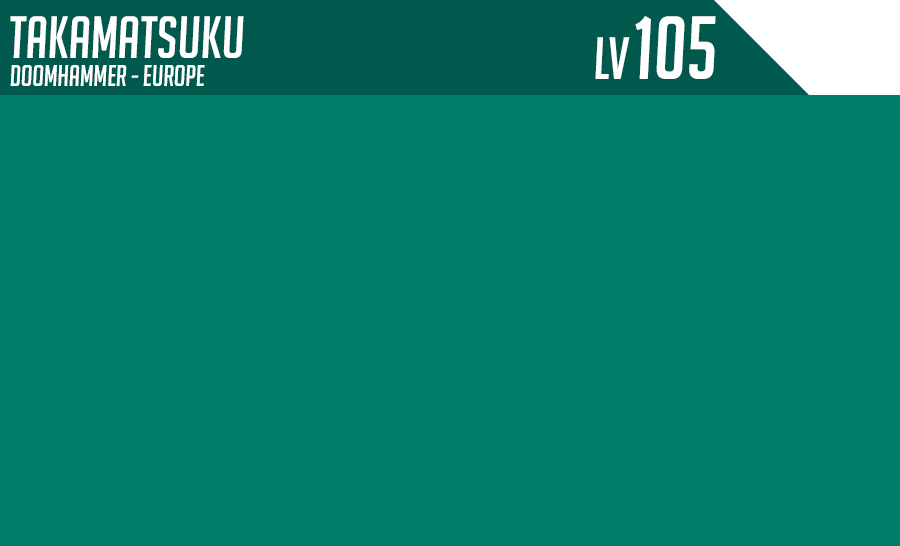
<style>
.page{position:relative;width:900px;height:546px;background:#007d6b}
.page>*{position:absolute;margin:0}
.t1{font:100px "BigNoodleTitling-Oblique";color:#ffffff}
.t2{font:150px "BigNoodleTitling-Oblique";color:#ffffff}
.t3{font:50px "BigNoodleTitling-Oblique";color:#ffffff}
</style>
<div class="page">
<p class="t1" style="left:10px;top:16px;width:234px;height:42px">takamatsuku</p>
<p class="t2" style="left:635px;top:16px;width:81px;height:63px">105</p>
<p class="t1" style="left:595px;top:37px;width:35px;height:42px">lv</p>
<p class="t3" style="left:10px;top:65px;width:195px;height:21px">doomhammer - EUROPE</p>
</div>
